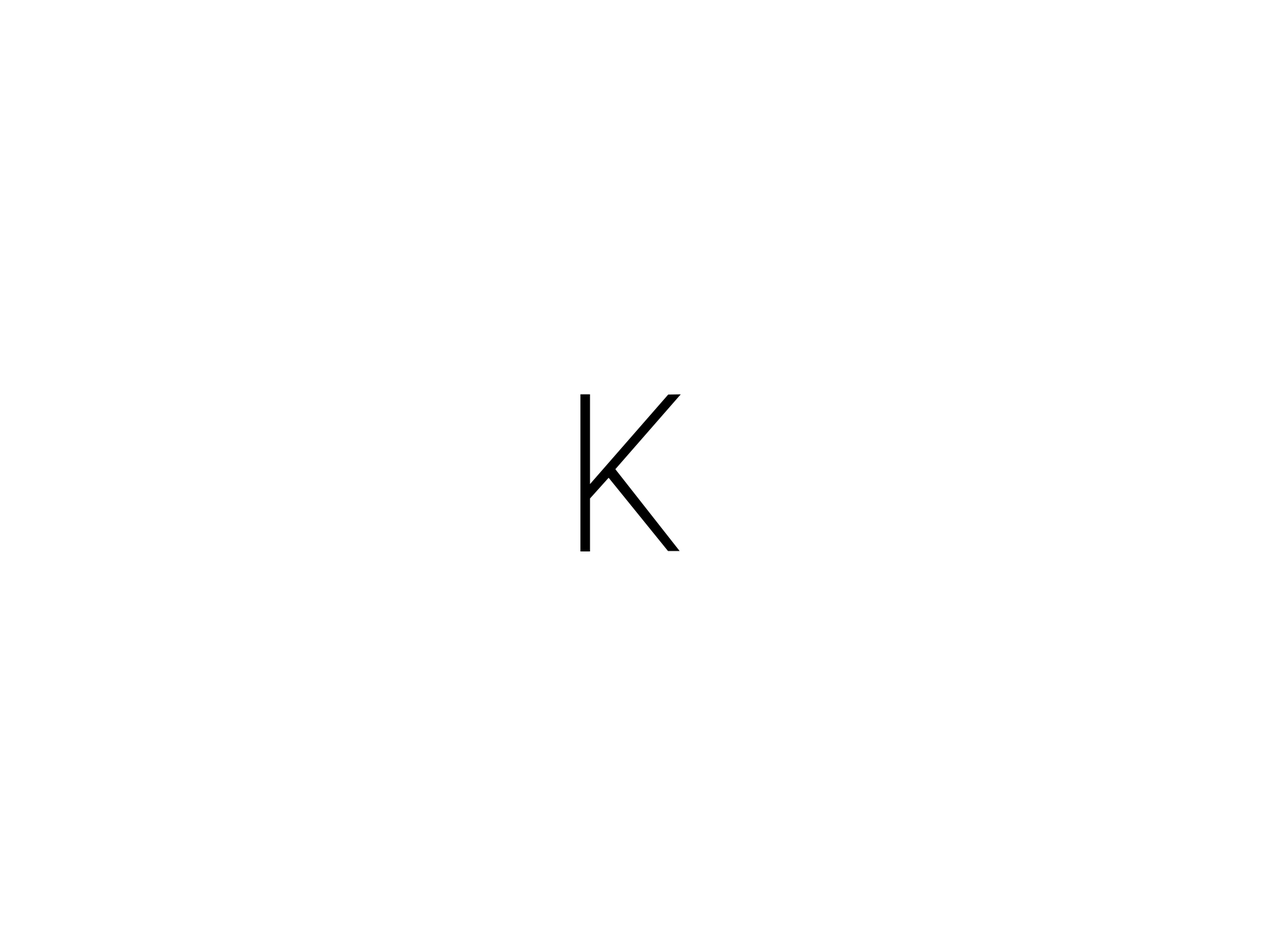
<style>
.page{position:relative;width:1261px;height:946px;background:#ffffff}
.page>*{position:absolute;margin:0}
.t1{font:222.4px "Alcubierre";color:#000000}
</style>
<div class="page">
<p class="t1" style="left:580px;top:394px;width:101px;height:157px">K</p>
</div>
